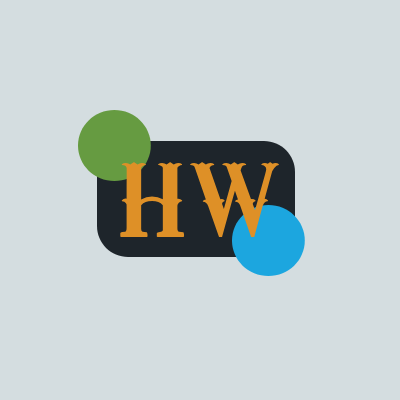
<style>
.page{position:relative;width:400px;height:400px;background:#d4dde0}
.page>*{position:absolute;margin:0}
.t1{font:91.5px "Oklahoma";color:#de9027}
</style>
<div class="page">
<p class="t1" style="left:120px;top:162px;width:159px;height:75px">HW</p>
</div>
